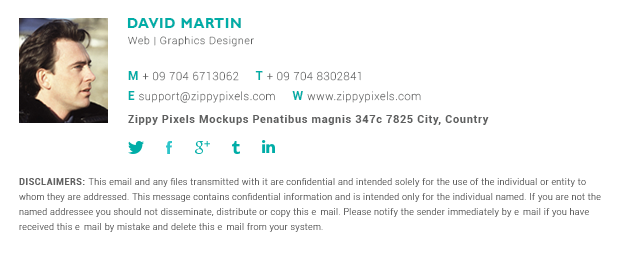
<style>
.page{position:relative;width:620px;height:259px;background:#ffffff}
.page>*{position:absolute;margin:0}
.t1{font:14px "GillSansMT-Bold";letter-spacing:0.04em;color:#00ada7;text-transform:uppercase}
.t2{font:10px "Roboto-Thin";letter-spacing:0.08em;color:#5d5e5e}
.t3{font:11px "Roboto-Thin";letter-spacing:0.06em;color:#5d5e5e}
.t4{font:12px "Roboto-Bold";letter-spacing:0.06em;color:#00ada7}
.t5{font:11px "Roboto-Bold";letter-spacing:0.06em;color:#5d5e5e}
.t6{font:8.5px/15.1px "Roboto-Light";letter-spacing:0.06em;color:#636363}
.t7{font:9px/15.1px "Roboto-Bold";letter-spacing:0.06em;color:#636363;text-transform:uppercase}
</style>
<div class="page">
<p class="t1" style="left:127px;top:18px;width:114px;height:10px">David Martin</p>
<p class="t2" style="left:128px;top:36px;width:126px;height:11px">Web | Graphics Designer</p>
<p class="t3" style="left:128px;top:71px;width:233px;height:10px"><span class="t4">M</span> + 09 704 6713062     <span class="t4">T </span>+ 09 704 8302841</p>
<p class="t3" style="left:128px;top:91px;width:293px;height:12px"><span class="t4">E </span>support@zippypixels.com     <span class="t4">W</span> www.zippypixels.com</p>
<p class="t5" style="left:128px;top:115px;width:361px;height:10px">Zippy Pixels Mockups Penatibus magnis 347c 7825 City, Country</p>
<p class="t6" style="left:19px;top:178px;width:582px;height:54px;text-align:right"><span class="t7">disclaimers: </span>This email and any files transmitted with it are confidential and intended solely for the use of the individual or entity to whom they are addressed. This message contains confidential information and is intended only for the individual named. If you are not the named addressee you should not disseminate, distribute or copy this e-mail. Please notify the sender immediately by e-mail if you have received this e-mail by mistake and delete this e-mail from your system.</p>
</div>
